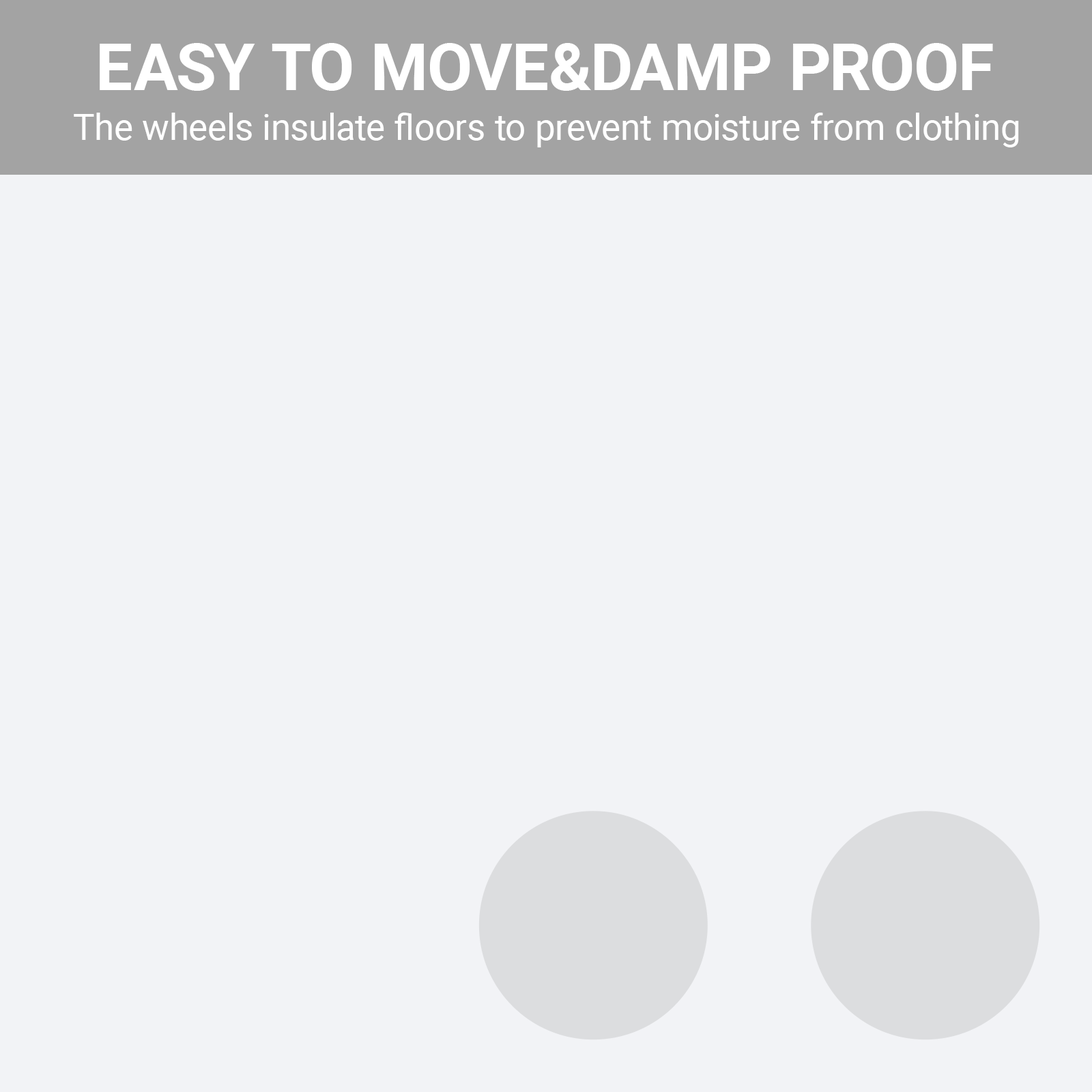
<style>
.page{position:relative;width:1092px;height:1092px;background:#f2f3f6}
.page>*{position:absolute;margin:0}
.t1{font:65.5px "Roboto-Bold";color:#ffffff}
.t2{font:36.4px "Roboto-Regular";color:#ffffff}
</style>
<div class="page">
<p class="t1" style="left:100px;top:43px;width:893px;height:48px">EASY TO MOVE&amp;DAMP PROOF</p>
<p class="t2" style="left:74px;top:113px;width:945px;height:34px">The wheels insulate floors to prevent moisture from clothing</p>
</div>
